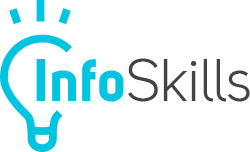
<style>
.page{position:relative;width:250px;height:152px;background:#ffffff}
.page>*{position:absolute;margin:0}
.t1{font:58.5px "UniSansBook";color:#444444}
.t2{font:58.5px "UniSansBold";color:#00c4e0}
</style>
<div class="page">
<p class="t1" style="left:36px;top:58px;width:214px;height:44px"><span class="t2">Info</span>Skills</p>
</div>
